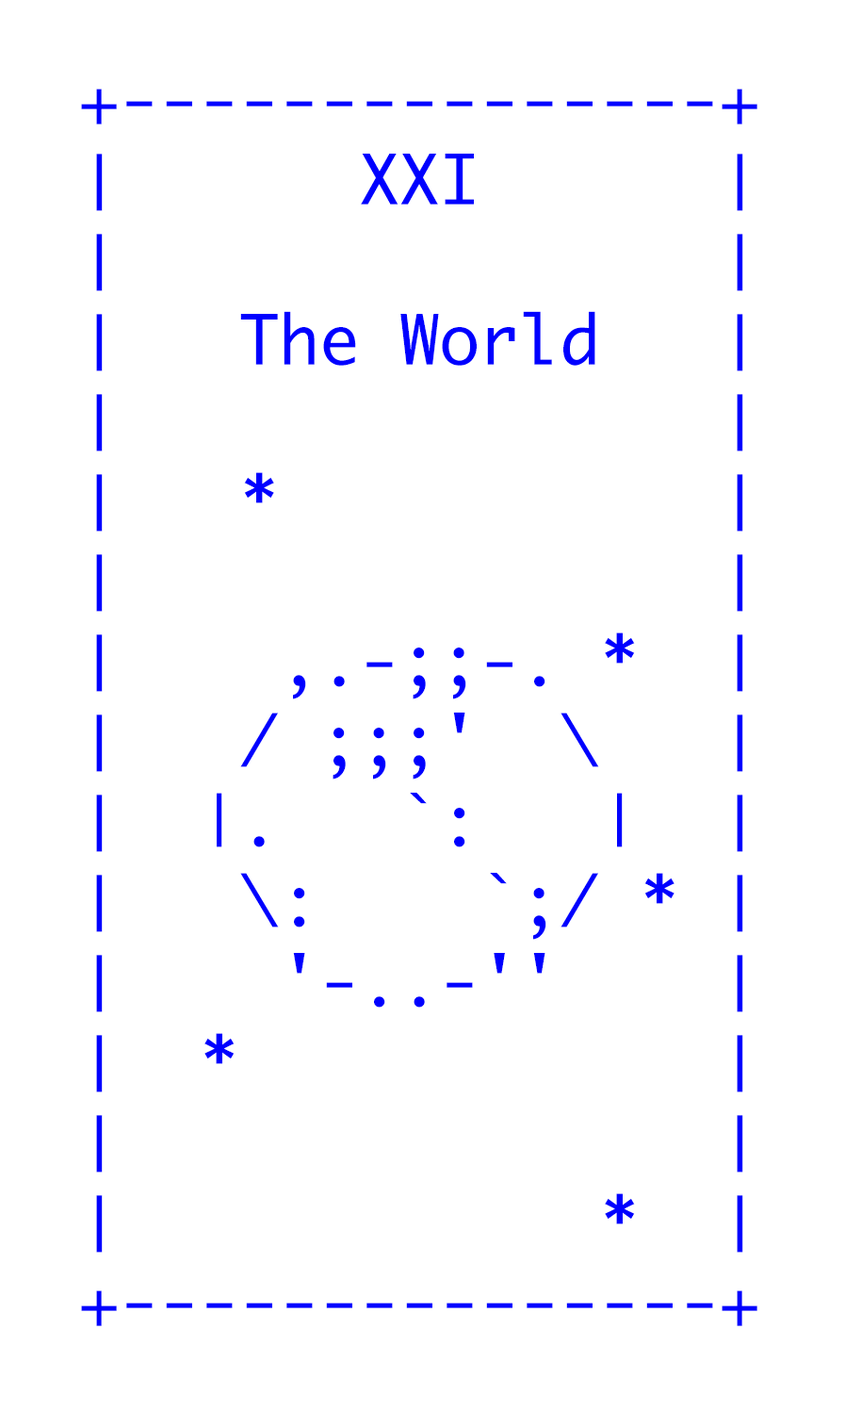
<style>
.page{position:relative;width:845px;height:1411px;background:#ffffff}
.page>*{position:absolute;margin:0}
.t1{font:66.7px "Monaco";color:#0000ff}
</style>
<div class="page">
<p class="t1" style="left:81px;top:89px;width:677px;height:1237px">+---------------+<br>│      XXI      │<br>│               │<br>│   The World   │<br>│               │<br>│   *           │<br>│               │<br>│    ,.-;;-. *  │<br>│   / ;;;'  \   │<br>│  |.   `:   |  │<br>│   \:    `;/ * │<br>│    '-..-''    │<br>│  *            │<br>│               │<br>│            *  │<br>+---------------+</p>
</div>
